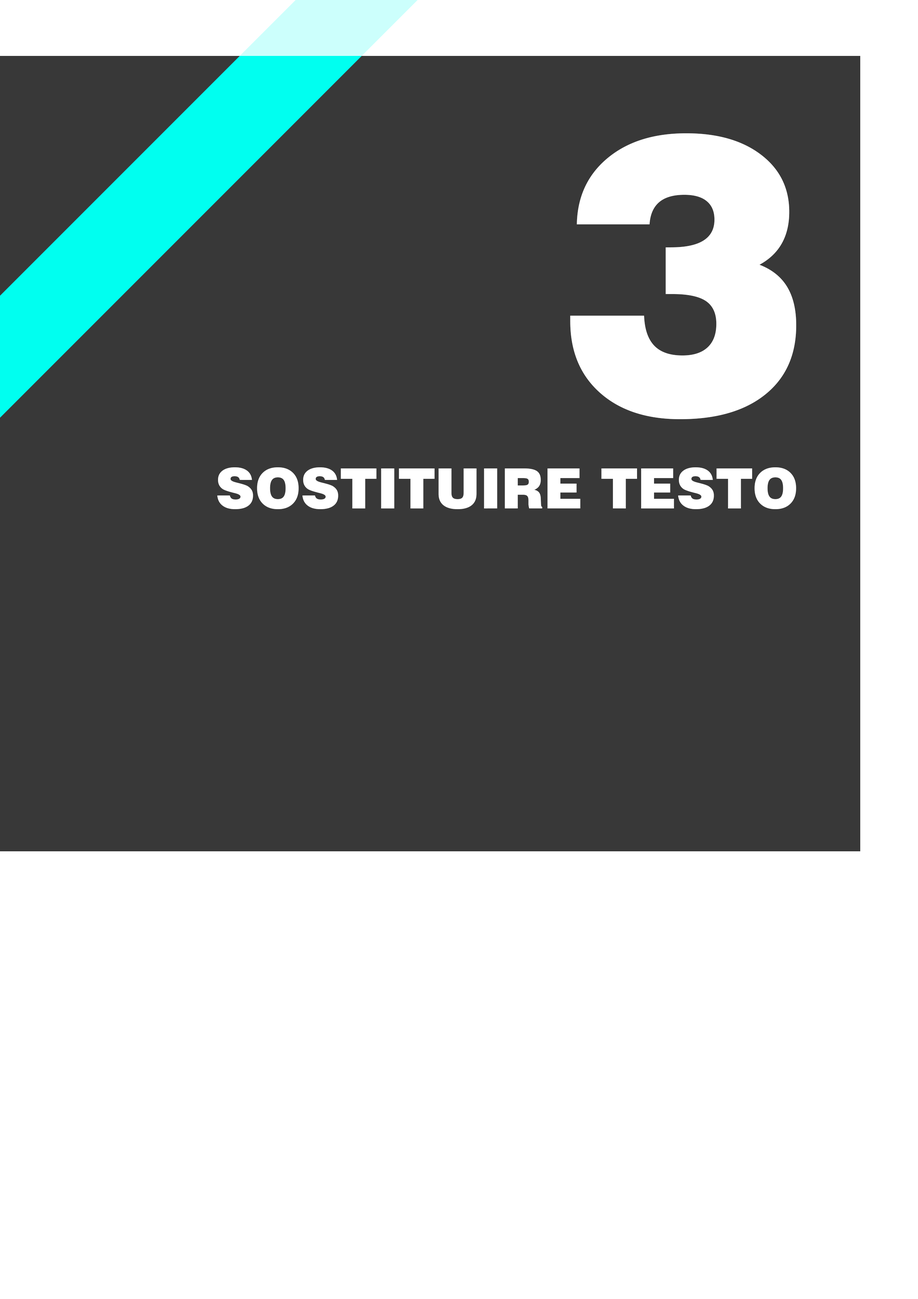
<style>
.page{position:relative;width:918px;height:1299px;background:#383838}
.page>*{position:absolute;margin:0}
.t1{font:385.6px "Swiss721BT-Black";color:#ffffff}
.t2{font:55.5px "Swiss721BT-Black";color:#ffffff}
</style>
<div class="page">
<p class="t1" style="left:570px;top:133px;width:226px;height:286px">3</p>
<p class="t2" style="left:217px;top:467px;width:579px;height:42px">SOSTITUIRE TESTO</p>
</div>
